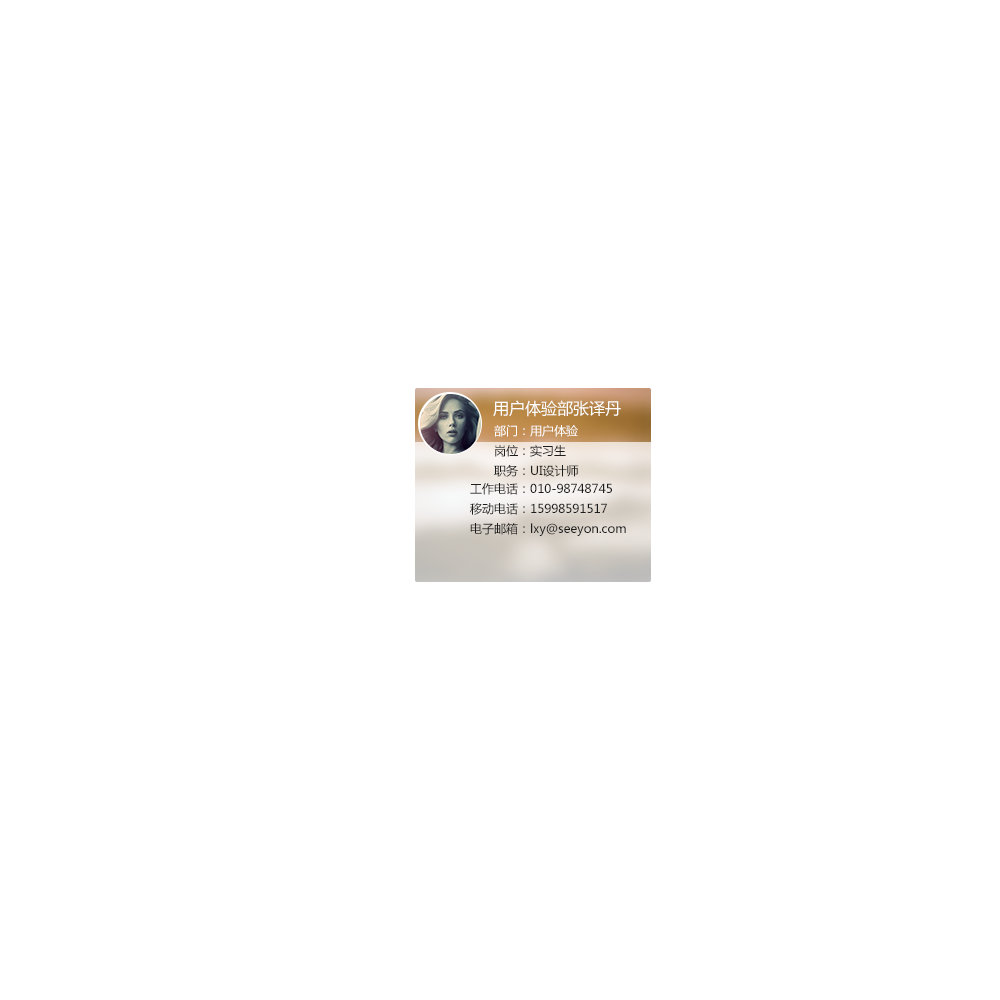
<style>
.page{position:relative;width:1000px;height:1000px;background:#ffffff}
.page>*{position:absolute;margin:0}
.t1{font:16px "MicrosoftYaHei";color:#ffffff}
.t2{font:12px/20px "MicrosoftYaHei";color:#1d1d1d}
.t3{font:12px/20px "MicrosoftYaHei";color:#ffffff}
</style>
<div class="page">
<p class="t1" style="left:493px;top:400px;width:128px;height:17px">用户体验部张译丹</p>
<p class="t2" style="left:494px;top:424px;width:85px;height:53px"><span class="t3">部门：用户体验<br></span>岗位：实习生<br>职务：UI设计师</p>
<p class="t2" style="left:470px;top:483px;width:156px;height:53px">工作电话：010-98748745<br>  移动电话：15998591517<br>  电子邮箱：lxy@seeyon.com</p>
</div>
